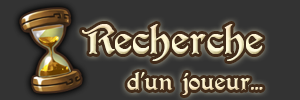
<style>
.page{position:relative;width:300px;height:100px;background:#333333}
.page>*{position:absolute;margin:0}
.t1{font:18px/36px "PerryGothic";color:#fcefcc}
.t2{font:30px/36px "PerryGothic";color:#fcefcc}
</style>
<div class="page">
<p class="t1" style="left:82px;top:24px;width:181px;height:71px"><span class="t2">Recherche <br></span>     d’un joueur...</p>
</div>
